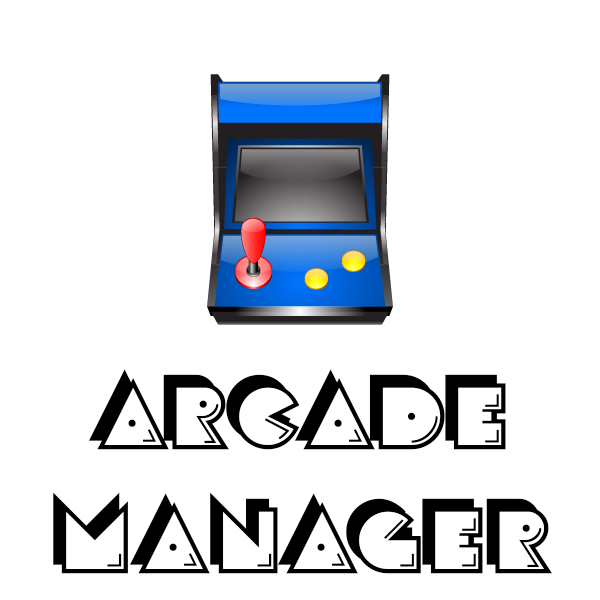
<style>
.page{position:relative;width:600px;height:600px;background:#ffffff}
.page>*{position:absolute;margin:0}
.t1{font:103.8px "CrackMan-Regular";color:#000000}
</style>
<div class="page">
<p class="t1" style="left:53px;top:369px;width:499px;height:205px;text-align:center">Arcade<br>Manager</p>
</div>
